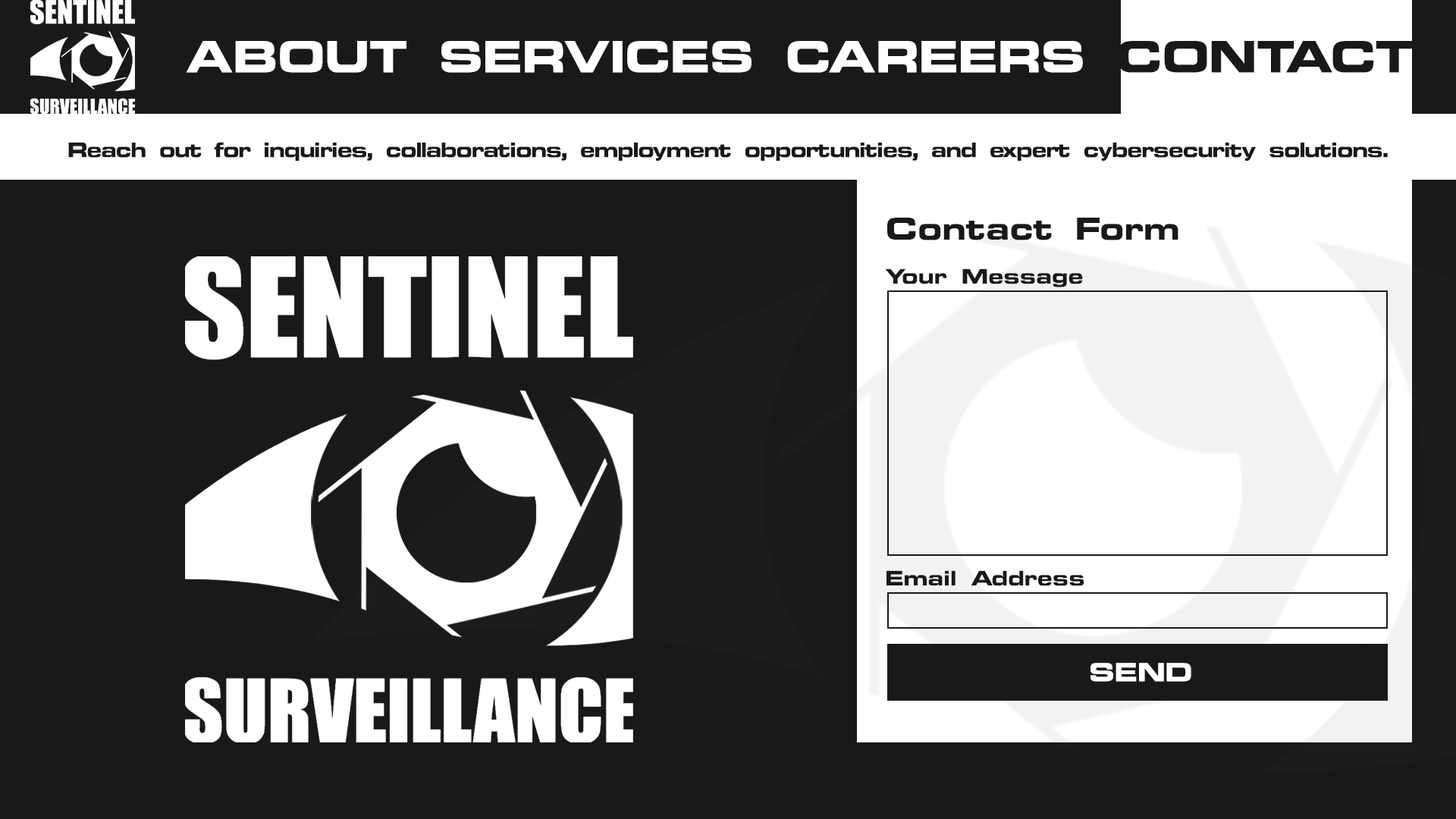
<style>
.page{position:relative;width:1456px;height:819px;background:#191919}
.page>*{position:absolute;margin:0}
.t1{font:39px "OPTIEdgarBold-Extended";color:#ffffff}
.t2{font:39px "OPTIEdgarBold-Extended";color:#191919}
.t3{font:18.2px "OPTIEdgarBold-Extended";letter-spacing:-0.06em;color:#191919}
.t4{font:27.3px "OPTIEdgarBold-Extended";color:#191919}
.t5{font:18.2px "OPTIEdgarBold-Extended";color:#191919}
.t6{font:22.7px "OPTIEdgarBold-Extended";color:#ffffff}
</style>
<div class="page">
<p class="t1" style="left:186px;top:41px;width:1227px;height:32px">ABOUT SERVICES CAREERS <span class="t2">CONTACT</span></p>
<p class="t3" style="left:68px;top:142px;width:1320px;height:19px">Reach out for inquiries, collaborations, employment opportunities, and expert cybersecurity solutions.</p>
<p class="t4" style="left:887px;top:218px;width:291px;height:22px">Contact Form</p>
<p class="t5" style="left:885px;top:268px;width:198px;height:19px">Your Message</p>
<p class="t5" style="left:886px;top:570px;width:198px;height:16px">Email Address</p>
<p class="t6" style="left:1090px;top:663px;width:101px;height:19px">SEND</p>
</div>
